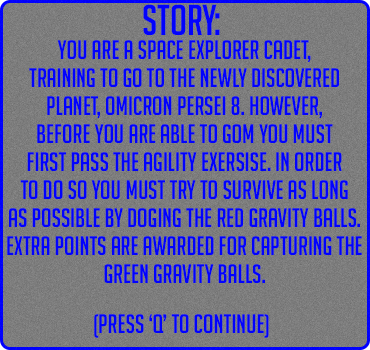
<style>
.page{position:relative;width:370px;height:350px}
.page>*{position:absolute;margin:0}
.t1{font:42px "BigNoodleTitling";color:#0202fd}
.t2{font:26px/28px "BigNoodleTitling";color:#0202fd}
.t3{font:26px "BigNoodleTitling";color:#0202fd}
</style>
<div class="page">
<p class="t1" style="left:143px;top:4px;width:77px;height:31px">Story:</p>
<p class="t2" style="left:7px;top:40px;width:355px;height:243px;text-align:center">you are a Space explorer cadet,<br>training to go to the newly discovered<br>planet, omicron persei 8. However,<br>before you are able to gom you must<br>first pass the agility exersise. in order<br>to do so you must try to survive as long<br>as possible by doging the red gravity balls.<br>extra points are awarded for capturing the<br>green gravity balls.</p>
<p class="t3" style="left:94px;top:314px;width:175px;height:24px">(press ‘Q’ to continue)</p>
</div>
